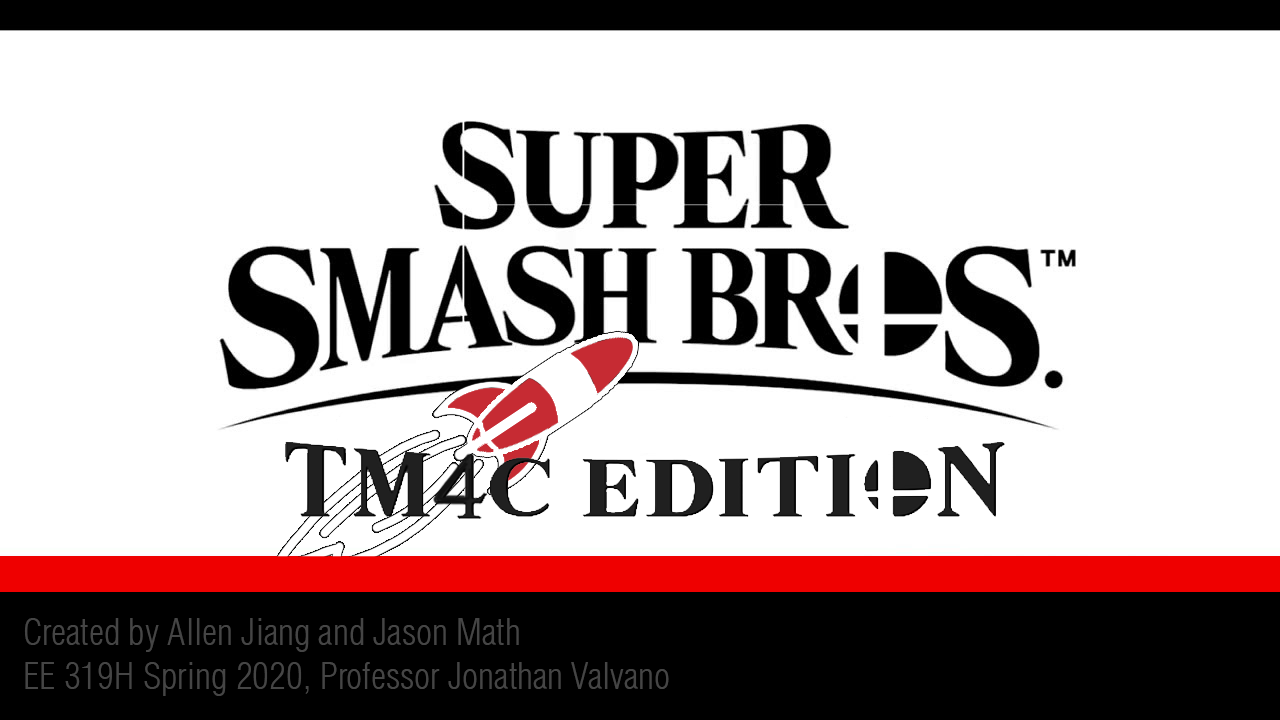
<style>
.page{position:relative;width:1280px;height:720px;background:#ffffff}
.page>*{position:absolute;margin:0}
.t1{font:36px "Swiss721BT-LightCondensed";color:#454545}
</style>
<div class="page">
<p class="t1" style="left:24px;top:618px;width:645px;height:78px">Created by Allen Jiang and Jason Math<br>EE 319H Spring 2020, Professor Jonathan Valvano</p>
</div>
